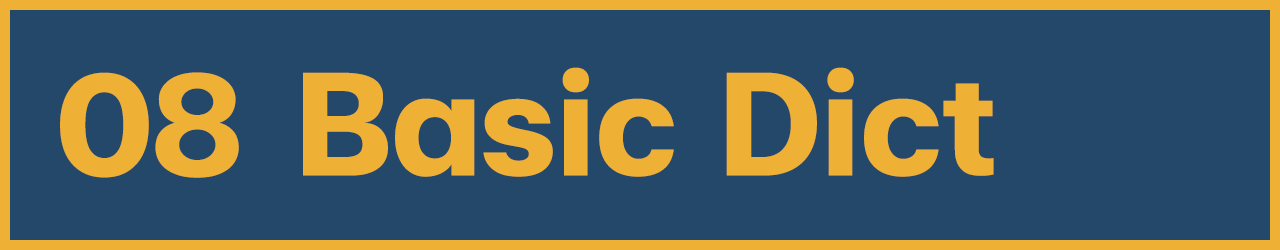
<style>
.page{position:relative;width:1280px;height:250px;background:#23486a}
.page>*{position:absolute;margin:0}
.t1{font:200px "FCMinimalBold";color:#efb036}
</style>
<div class="page">
<p class="t1" style="left:60px;top:72px;width:179px;height:106px">08</p>
<p class="t1" style="left:303px;top:67px;width:691px;height:110px">Basic Dict</p>
</div>
